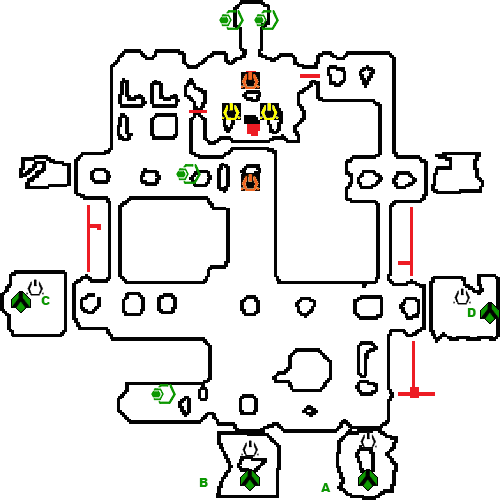
<style>
.page{position:relative;width:500px;height:500px;background:#ffffff}
.page>*{position:absolute;margin:0}
.t1{font:12px "Arial-Black";color:#0c9801}
</style>
<div class="page">
<p class="t1" style="left:41px;top:296px;width:9px;height:9px">C</p>
<p class="t1" style="left:467px;top:308px;width:9px;height:9px">D</p>
<p class="t1" style="left:199px;top:478px;width:9px;height:9px">B</p>
<p class="t1" style="left:321px;top:483px;width:10px;height:9px">A</p>
</div>
